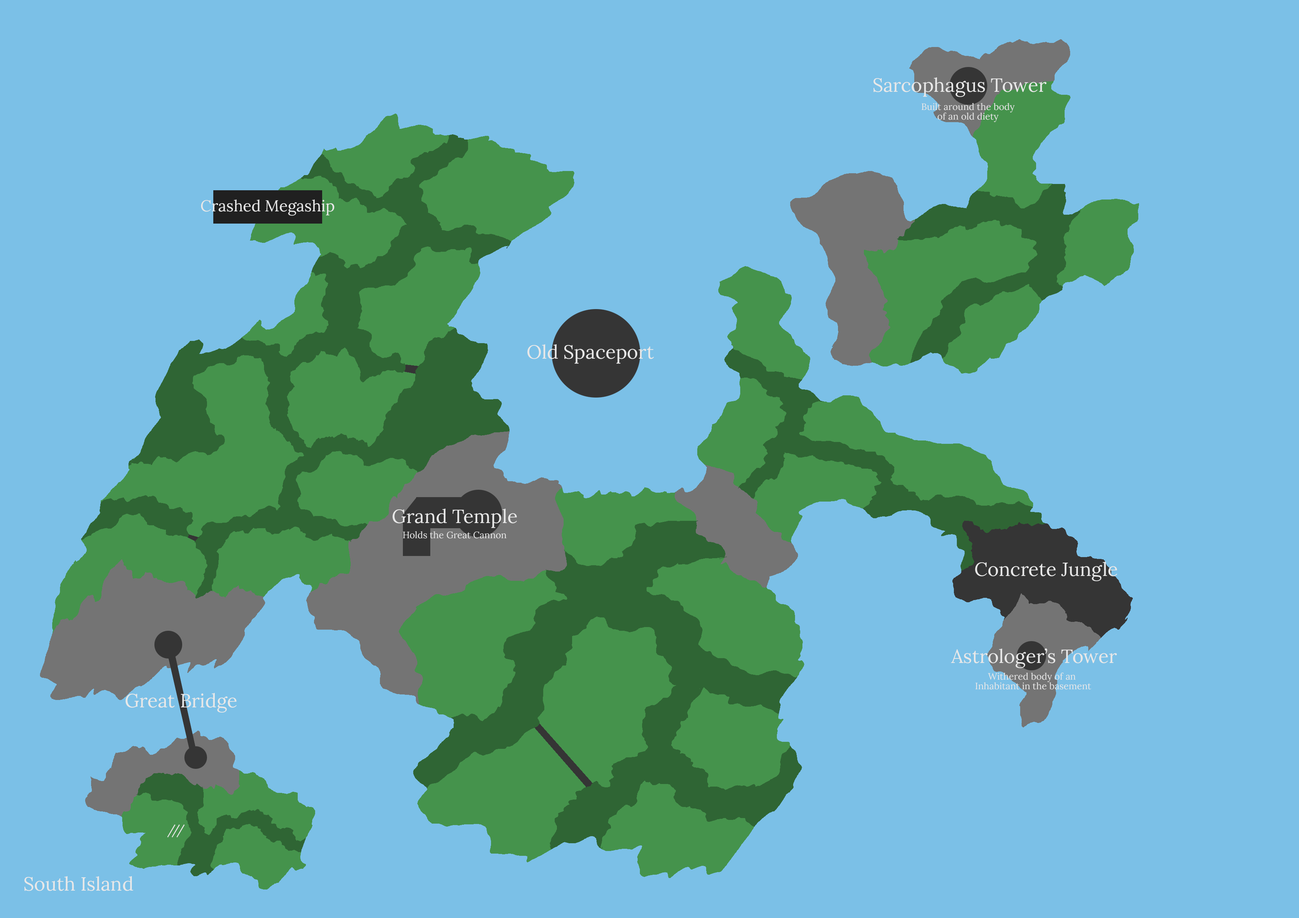
<style>
.page{position:relative;width:1299px;height:918px;background:#7bc0e7}
.page>*{position:absolute;margin:0}
.t1{font:19.1px "Lora-Regular";color:#e8e8e8}
.t2{font:9.3px/10px "Lora-Regular";color:#e8e8e8}
.t3{font:15.7px "Lora-Regular";color:#e8e8e8}
.t4{font:9.3px "Lora-Regular";color:#e8e8e8}
.t5{font:12.5px "Lora-Regular";color:#e8e8e8}
</style>
<div class="page">
<p class="t1" style="left:873px;top:77px;width:173px;height:20px">Sarcophagus Tower</p>
<p class="t2" style="left:921px;top:103px;width:93px;height:19px;text-align:center">Built around the body<br>of an old diety</p>
<p class="t3" style="left:201px;top:200px;width:133px;height:16px">Crashed Megaship</p>
<p class="t1" style="left:527px;top:344px;width:127px;height:20px">Old Spaceport</p>
<p class="t1" style="left:392px;top:509px;width:125px;height:19px">Grand Temple</p>
<p class="t4" style="left:403px;top:531px;width:103px;height:8px">Holds the Great Cannon</p>
<p class="t1" style="left:975px;top:562px;width:142px;height:19px">Concrete Jungle</p>
<p class="t1" style="left:951px;top:648px;width:166px;height:20px">Astrologer’s Tower</p>
<p class="t2" style="left:975px;top:673px;width:116px;height:17px;text-align:center">Withered body of an <br>Inhabitant in the basement</p>
<p class="t1" style="left:126px;top:693px;width:111px;height:20px">Great Bridge</p>
<p class="t5" style="left:167px;top:824px;width:18px;height:14px">///</p>
<p class="t1" style="left:24px;top:876px;width:109px;height:15px">South Island</p>
</div>
